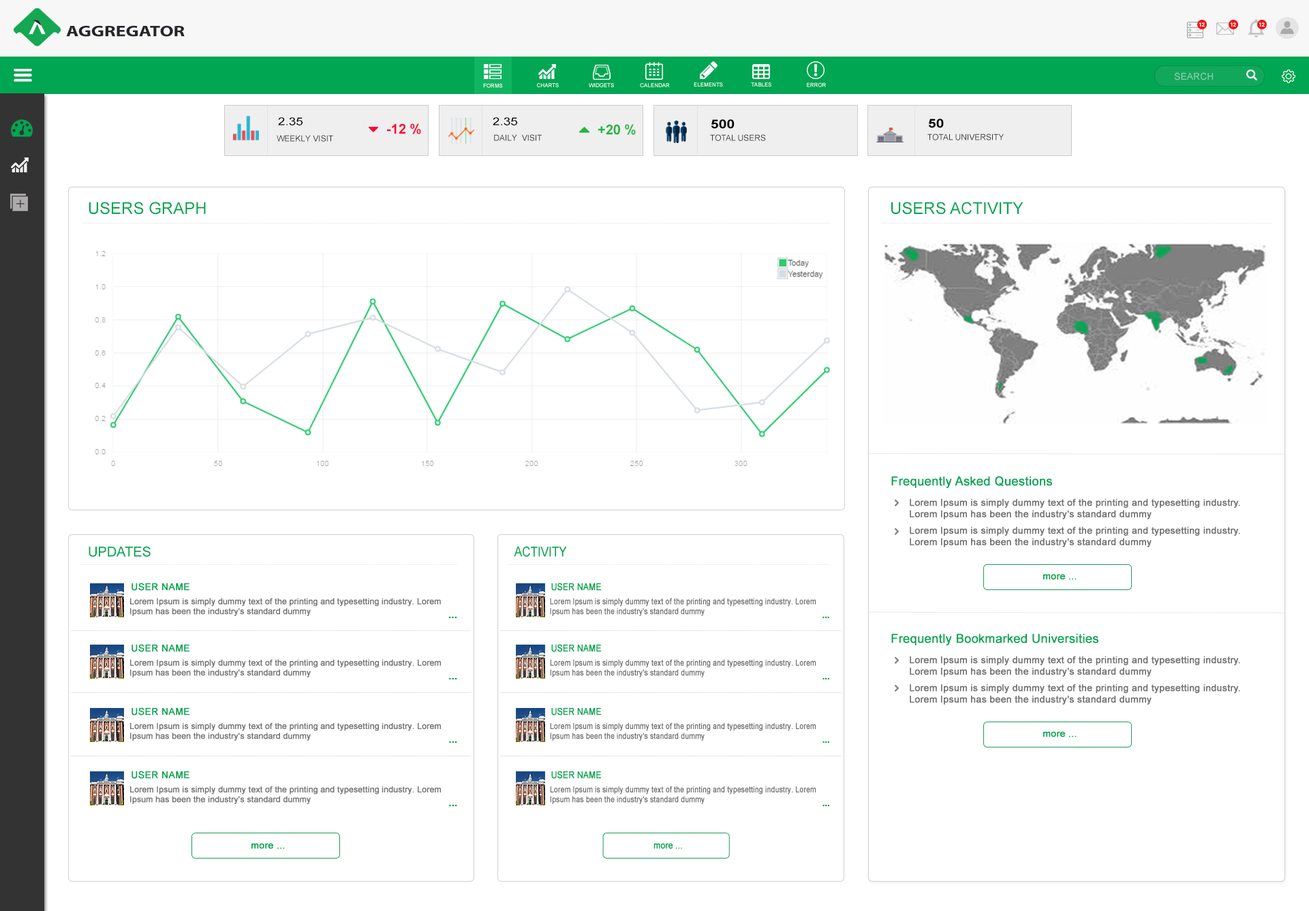
<style>
.page{position:relative;width:1309px;height:911px;background:#ffffff}
.page>*{position:absolute;margin:0}
.t1{font:15.5px "MyriadPro-Bold";color:#25262a;text-transform:uppercase;scale:1.24 1}
.t2{font:5.5px "Roboto-Bold";color:#ffffff;text-transform:uppercase}
.t3{font:9.5px "ArialMT";color:#92ccae;text-transform:uppercase}
.t4{font:5.5px "ArialMT";color:#ffffff;text-transform:uppercase}
.t5{font:5.5px "ArialMT";text-transform:uppercase}
.t6{font:10.9px "ArialMT";color:#000000;text-transform:uppercase;scale:1.18 1}
.t7{font:13.6px "Arial-BoldMT";color:#fa0735;text-transform:uppercase}
.t8{font:13.6px "Arial-BoldMT";color:#24b53f;text-transform:uppercase}
.t9{font:12.3px "Arial-BoldMT";color:#000000;text-transform:uppercase;scale:1.18 1}
.t10{font:8.2px "ArialMT";color:#323232;text-transform:uppercase}
.t11{font:16.4px "ArialMT";color:#00a651;text-transform:uppercase}
.t12{font:12.3px "ArialMT";color:#00a651;font-weight:bold}
.t13{font:9.5px "ArialMT";color:#747474;font-weight:bold}
.t14{font:13.6px "ArialMT";color:#00a651;text-transform:uppercase}
.t15{font:13.6px "ArialMT";color:#00a651;text-transform:uppercase;scale:0.85 1}
.t16{font:9.5px "ArialMT";color:#00a651;font-weight:bold}
.t17{font:9.5px "ArialMT";color:#00a651;text-transform:uppercase;font-weight:bold}
.t18{font:9.5px "ArialMT";color:#00a651;text-transform:uppercase;font-weight:bold;scale:0.85 1}
.t19{font:8.2px "ArialMT";color:#747474;font-weight:bold}
.t20{font:8.2px "ArialMT";color:#747474;font-weight:bold;scale:0.85 1}
.t21{font:9.5px "Arial-BoldMT";color:#00a651;text-transform:uppercase;font-weight:bold}
.t22{font:9.5px "Arial-BoldMT";color:#00a651;text-transform:uppercase;font-weight:bold;scale:0.85 1}
.t23{font:9.5px "ArialMT";color:#00a651;font-weight:bold;scale:0.85 1}
</style>
<div class="page">
<p class="t1" style="left:66px;top:25px;width:119px;height:12px">Aggregator</p>
<p class="t2" style="left:1199px;top:22px;width:6px;height:5px">12</p>
<p class="t2" style="left:1230px;top:22px;width:6px;height:5px">12</p>
<p class="t2" style="left:1259px;top:22px;width:6px;height:5px">12</p>
<p class="t3" style="left:1174px;top:72px;width:39px;height:8px">Search</p>
<p class="t4" style="left:483px;top:83px;width:20px;height:5px">forms</p>
<p class="t5" style="left:537px;top:83px;width:22px;height:4px">Charts</p>
<p class="t5" style="left:589px;top:83px;width:25px;height:4px">Widgets</p>
<p class="t4" style="left:640px;top:83px;width:30px;height:4px">calendar</p>
<p class="t4" style="left:694px;top:82px;width:29px;height:5px">Elements</p>
<p class="t4" style="left:751px;top:82px;width:20px;height:5px">tables</p>
<p class="t5" style="left:807px;top:82px;width:19px;height:5px">error</p>
<p class="t6" style="left:278px;top:117px;width:25px;height:8px">2.35</p>
<p class="t7" style="left:387px;top:123px;width:34px;height:11px">-12 %</p>
<p class="t6" style="left:493px;top:117px;width:24px;height:8px">2.35</p>
<p class="t8" style="left:598px;top:124px;width:38px;height:11px">+20 %</p>
<p class="t9" style="left:711px;top:119px;width:24px;height:10px">500</p>
<p class="t9" style="left:928px;top:119px;width:16px;height:9px">50</p>
<p class="t10" style="left:277px;top:135px;width:56px;height:7px">Weekly Visit</p>
<p class="t10" style="left:494px;top:134px;width:48px;height:7px">Daily  Visit</p>
<p class="t10" style="left:710px;top:134px;width:56px;height:7px">Total users</p>
<p class="t10" style="left:927px;top:134px;width:77px;height:6px">Total university</p>
<p class="t11" style="left:89px;top:202px;width:117px;height:13px">users Graph</p>
<p class="t11" style="left:891px;top:202px;width:132px;height:13px">users Activity</p>
<p class="t12" style="left:891px;top:476px;width:161px;height:13px">Frequently Asked Questions</p>
<p class="t13" style="left:910px;top:499px;width:330px;height:20px">Lorem Ipsum is simply dummy text of the printing and typesetting industry. Lorem Ipsum has been the industry's standard dummy</p>
<p class="t13" style="left:910px;top:527px;width:330px;height:20px">Lorem Ipsum is simply dummy text of the printing and typesetting industry. Lorem Ipsum has been the industry's standard dummy</p>
<p class="t14" style="left:89px;top:546px;width:62px;height:11px">Updates</p>
<p class="t15" style="left:514px;top:546px;width:53px;height:11px">activity</p>
<p class="t16" style="left:1043px;top:574px;width:34px;height:6px">more ...</p>
<p class="t17" style="left:132px;top:583px;width:57px;height:8px">user name</p>
<p class="t18" style="left:551px;top:583px;width:50px;height:8px">user name</p>
<p class="t19" style="left:130px;top:598px;width:311px;height:18px">Lorem Ipsum is simply dummy text of the printing and typesetting industry. Lorem Ipsum has been the industry's standard dummy</p>
<p class="t20" style="left:550px;top:598px;width:266px;height:18px">Lorem Ipsum is simply dummy text of the printing and typesetting industry. Lorem Ipsum has been the industry's standard dummy</p>
<p class="t21" style="left:449px;top:617px;width:8px;height:2px">...</p>
<p class="t22" style="left:822px;top:617px;width:7px;height:2px">...</p>
<p class="t12" style="left:891px;top:634px;width:207px;height:12px">Frequently Bookmarked Universities</p>
<p class="t17" style="left:132px;top:644px;width:57px;height:8px">user name</p>
<p class="t18" style="left:551px;top:644px;width:50px;height:8px">user name</p>
<p class="t19" style="left:130px;top:660px;width:311px;height:17px">Lorem Ipsum is simply dummy text of the printing and typesetting industry. Lorem Ipsum has been the industry's standard dummy</p>
<p class="t20" style="left:550px;top:660px;width:266px;height:17px">Lorem Ipsum is simply dummy text of the printing and typesetting industry. Lorem Ipsum has been the industry's standard dummy</p>
<p class="t13" style="left:910px;top:656px;width:330px;height:21px">Lorem Ipsum is simply dummy text of the printing and typesetting industry. Lorem Ipsum has been the industry's standard dummy</p>
<p class="t21" style="left:449px;top:678px;width:8px;height:2px">...</p>
<p class="t22" style="left:822px;top:678px;width:7px;height:2px">...</p>
<p class="t13" style="left:910px;top:684px;width:330px;height:21px">Lorem Ipsum is simply dummy text of the printing and typesetting industry. Lorem Ipsum has been the industry's standard dummy</p>
<p class="t17" style="left:132px;top:707px;width:57px;height:8px">user name</p>
<p class="t18" style="left:551px;top:707px;width:50px;height:8px">user name</p>
<p class="t19" style="left:130px;top:723px;width:311px;height:18px">Lorem Ipsum is simply dummy text of the printing and typesetting industry. Lorem Ipsum has been the industry's standard dummy</p>
<p class="t20" style="left:550px;top:723px;width:266px;height:18px">Lorem Ipsum is simply dummy text of the printing and typesetting industry. Lorem Ipsum has been the industry's standard dummy</p>
<p class="t16" style="left:1043px;top:731px;width:34px;height:6px">more ...</p>
<p class="t21" style="left:449px;top:741px;width:8px;height:2px">...</p>
<p class="t22" style="left:822px;top:741px;width:7px;height:2px">...</p>
<p class="t17" style="left:132px;top:771px;width:57px;height:8px">user name</p>
<p class="t18" style="left:551px;top:771px;width:50px;height:8px">user name</p>
<p class="t19" style="left:130px;top:786px;width:311px;height:18px">Lorem Ipsum is simply dummy text of the printing and typesetting industry. Lorem Ipsum has been the industry's standard dummy</p>
<p class="t20" style="left:550px;top:786px;width:266px;height:18px">Lorem Ipsum is simply dummy text of the printing and typesetting industry. Lorem Ipsum has been the industry's standard dummy</p>
<p class="t21" style="left:449px;top:805px;width:8px;height:2px">...</p>
<p class="t22" style="left:822px;top:805px;width:7px;height:2px">...</p>
<p class="t16" style="left:251px;top:843px;width:34px;height:6px">more ...</p>
<p class="t23" style="left:653px;top:843px;width:29px;height:6px">more ...</p>
</div>
